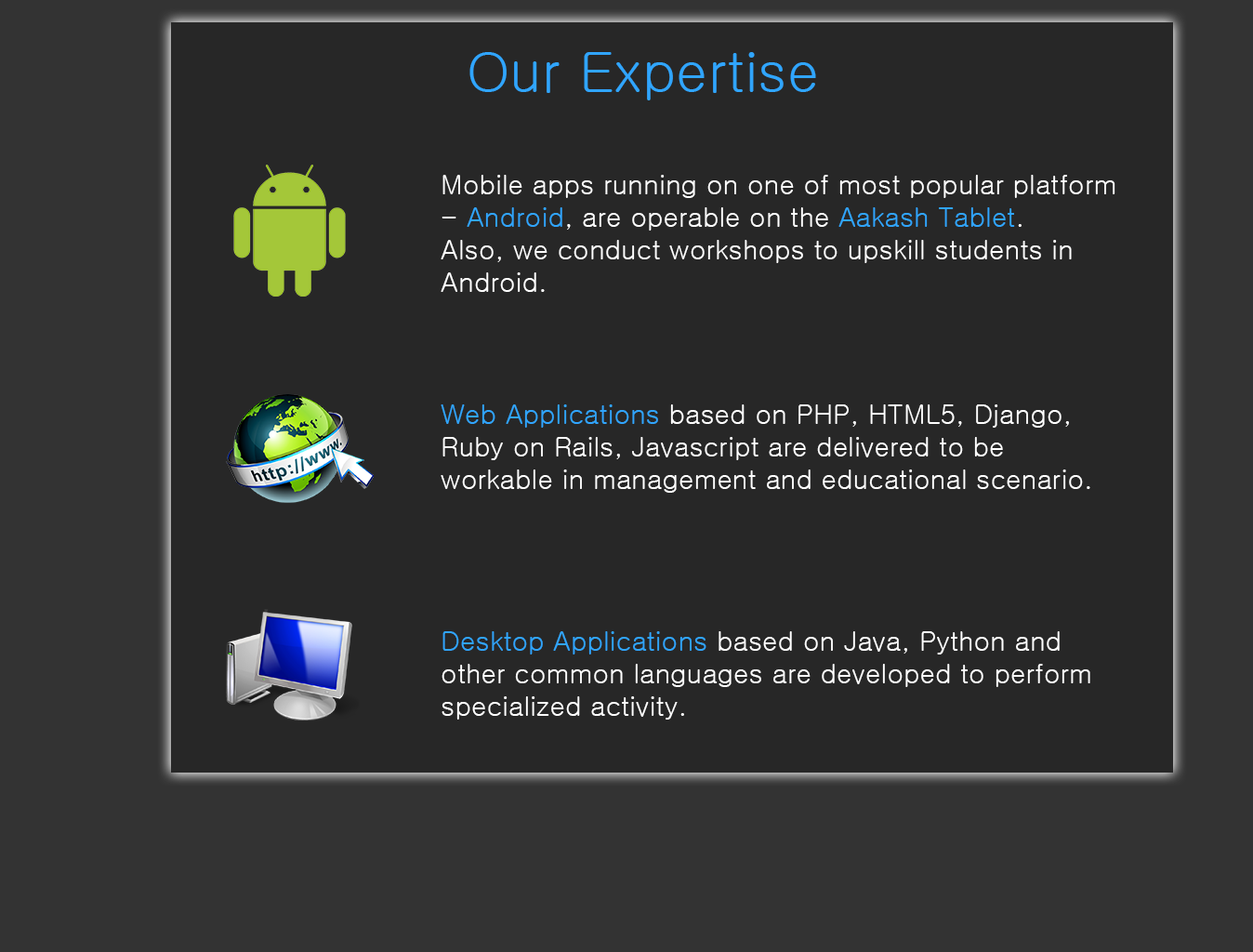
<style>
.page{position:relative;width:1253px;height:952px;background:#272727}
.page>*{position:absolute;margin:0}
.t1{font:56.2px "Gulim";color:#30a5ff}
.t2{font:27px "Gulim";color:#ffffff}
.t3{font:27px "Gulim";color:#30a5ff}
</style>
<div class="page">
<p class="t1" style="left:469px;top:52px;width:347px;height:48px">Our Expertise</p>
<p class="t2" style="left:441px;top:175px;width:674px;height:117px">Mobile apps running on one of most popular platform   - <span class="t3">Android</span>, are operable on the <span class="t3">Aakash Tablet</span>.<br>Also, we conduct workshops to upskill students in   Android.</p>
<p class="t2" style="left:441px;top:404px;width:649px;height:89px"><span class="t3">Web Applications</span> based on PHP, HTML5, Django, Ruby on Rails, Javascript are delivered to be<br>workable in management and educational scenario.</p>
<p class="t2" style="left:441px;top:631px;width:649px;height:88px"><span class="t3">Desktop Applications</span> based on Java, Python and other common languages are developed to perform specialized activity.</p>
</div>
